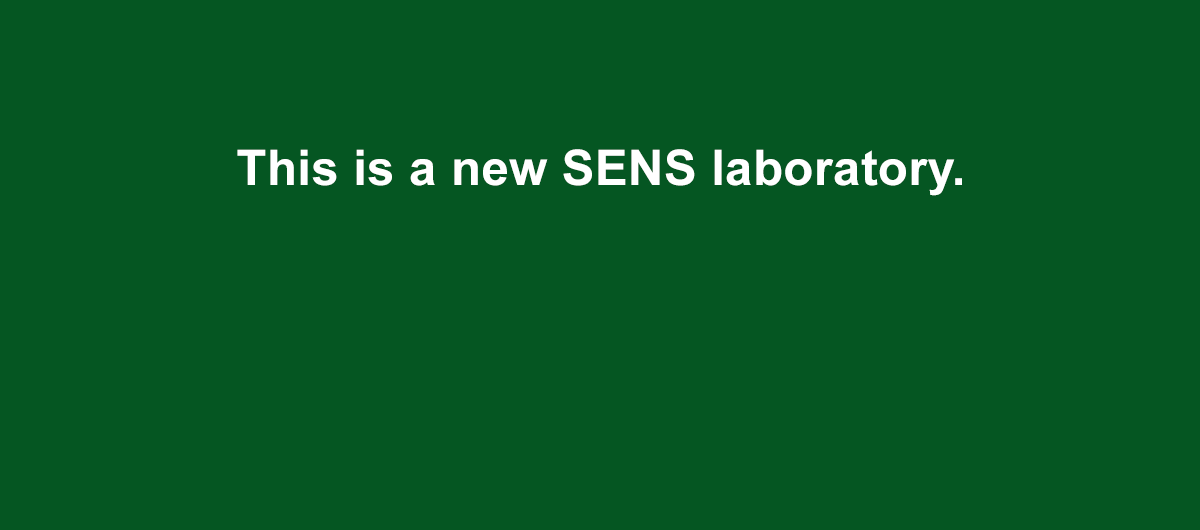
<style>
.page{position:relative;width:1200px;height:530px;background:#055622}
.page>*{position:absolute;margin:0}
.t1{font:49px "Arial-BoldMT";letter-spacing:0.01em;color:#ffffff}
</style>
<div class="page">
<p class="t1" style="left:237px;top:149px;width:725px;height:47px">This is a new SENS laboratory.</p>
</div>
